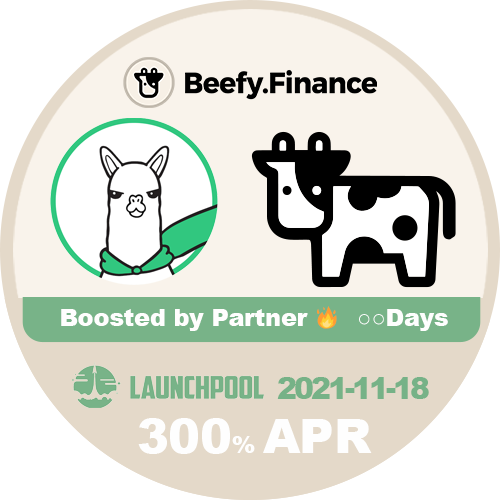
<style>
.page{position:relative;width:500px;height:500px;background:#ffffff}
.page>*{position:absolute;margin:0}
.t1{font:24px "Arial-Black";letter-spacing:-0.01em;color:#fffefe}
.t2{font:24px "EmojiOneColor";letter-spacing:-0.01em;color:#fffefe}
.t3{font:24px "Arial-Black";letter-spacing:-0.01em;color:#fefefe}
.t4{font:30px "Arial-Black";letter-spacing:-0.1em;color:#76b287}
.t5{font:48px "Arial-Black";letter-spacing:-0.01em;color:#fefefe}
</style>
<div class="page">
<p class="t1" style="left:61px;top:306px;width:276px;height:25px">Boosted by Partner <span class="t2">🔥</span></p>
<p class="t3" style="left:359px;top:309px;width:89px;height:22px">○○Days</p>
<p class="t4" style="left:277px;top:377px;width:152px;height:22px">2021-11-18</p>
<p class="t5" style="left:138px;top:418px;width:234px;height:36px">300<span class="t3">% </span>APR</p>
</div>
